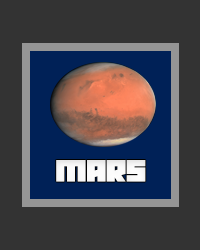
<style>
.page{position:relative;width:200px;height:250px;background:#333333}
.page>*{position:absolute;margin:0}
.t1{font:31.4px "RobotRadicals";color:#ffffff}
</style>
<div class="page">
<p class="t1" style="left:56px;top:160px;width:90px;height:22px">Mars</p>
</div>
